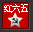
<style>
.page{position:relative;width:33px;height:32px;background:#c50000}
.page>*{position:absolute;margin:0}
.t1{font:10.4px "SimSun";letter-spacing:-0.25em;color:#ffffff}
</style>
<div class="page">
<p class="t1" style="left:4px;top:4px;width:24px;height:9px">红六五</p>
</div>
